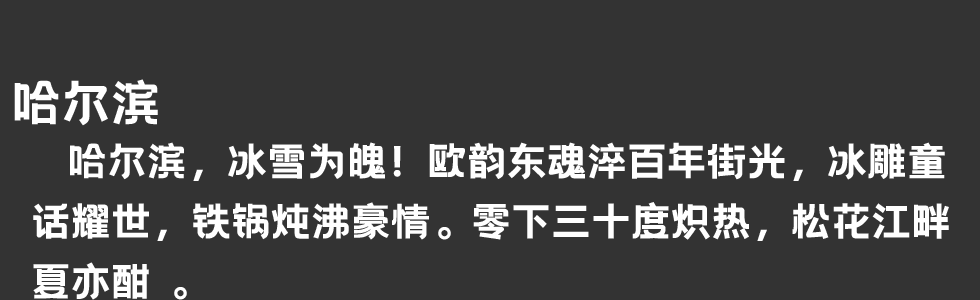
<style>
.page{position:relative;width:980px;height:300px;background:#333333}
.page>*{position:absolute;margin:0}
.t1{font:50px "HelloFont-WenYiHei";color:#ffffff}
.t2{font:40px/60px "HelloFont-WenYiHei";color:#ffffff}
</style>
<div class="page">
<p class="t1" style="left:14px;top:79px;width:144px;height:47px">哈尔滨</p>
<p class="t2" style="left:33px;top:142px;width:916px;height:158px">哈尔滨，冰雪为魄！欧韵东魂淬百年街光，冰雕童<br>话耀世，铁锅炖沸豪情。零下三十度炽热，松花江畔<br>夏亦酣 。</p>
</div>
